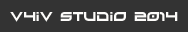
<style>
.page{position:relative;width:188px;height:32px;background:#333333}
.page>*{position:absolute;margin:0}
.t1{font:12px "Xirod";color:#fdfcfa}
</style>
<div class="page">
<p class="t1" style="left:10px;top:12px;width:168px;height:10px">V4iV Studio 2014</p>
</div>
